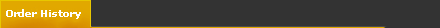
<style>
.page{position:relative;width:440px;height:28px;background:#333333}
.page>*{position:absolute;margin:0}
.t1{font:10px "Verdana-Bold";color:#ffffff}
</style>
<div class="page">
<p class="t1" style="left:6px;top:9px;width:75px;height:10px">Order History</p>
</div>
